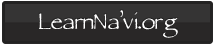
<style>
.page{position:relative;width:215px;height:45px;background:#292727}
.page>*{position:absolute;margin:0}
.t1{font:36px "ParchmentMF";color:#ffffff}
</style>
<div class="page">
<p class="t1" style="left:39px;top:10px;width:139px;height:28px">LearnNa’vi.org</p>
</div>
